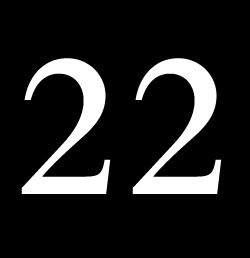
<style>
.page{position:relative;width:250px;height:258px;background:#000000}
.page>*{position:absolute;margin:0}
.t1{font:212.5px "BemboMT-SemiBold";letter-spacing:0.1em;color:#ffffff}
</style>
<div class="page">
<p class="t1" style="left:21px;top:58px;width:90px;height:136px">2</p>
<p class="t1" style="left:132px;top:58px;width:90px;height:136px">2</p>
</div>
